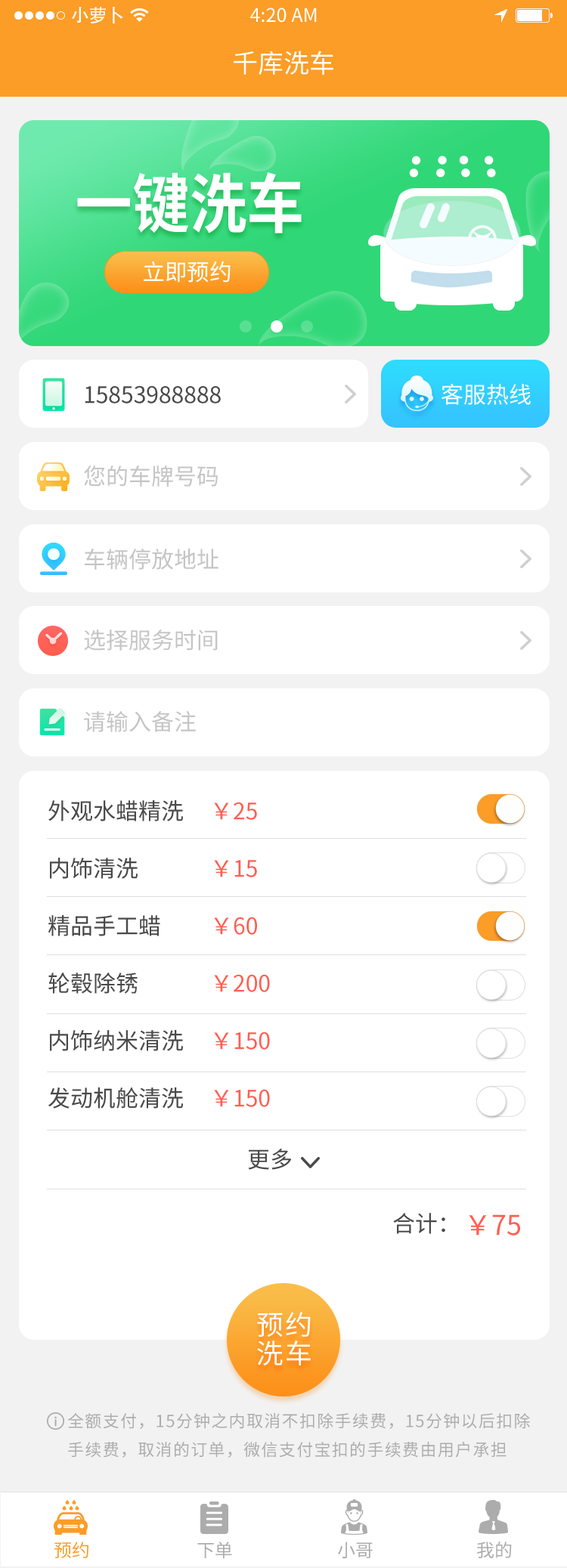
<style>
.page{position:relative;width:567px;height:1568px;background:#ffffff}
.page>*{position:absolute;margin:0}
.t1{font:18.1px "AdobeHeitiStd-Regular";color:#ffffff}
.t2{font:18.9px "SourceHanSansCN-Regular";color:#ffffff}
.t3{font:25.7px "SourceHanSansCN-Regular";color:#ffffff}
.t4{font:64.4px "SourceHanSansCN-Bold";color:#ffffff;scale:0.89 1}
.t5{font:22.7px "SourceHanSansCN-Regular";color:#ffffff}
.t6{font:22.7px "SourceHanSansCN-Regular";color:#4a4a4a}
.t7{font:22.7px "SourceHanSansCN-Regular";color:#c5c5c5}
.t8{font:22.7px/57.4px "SourceHanSansCN-Regular";color:#4a4a4a}
.t9{font:22.7px/57.4px "SourceHanSansCN-Regular";color:#ff5f52}
.t10{font:27.2px "SourceHanSansCN-Regular";color:#ff5f52}
.t11{font:27.2px/28.7px "SourceHanSansCN-Regular";letter-spacing:0.06em;color:#ffffff}
.t12{font:16.6px/28.7px "SourceHanSansCN-Regular";letter-spacing:0.06em;color:#acacac}
.t13{font:18.1px "SourceHanSansCN-Regular";color:#fb9d27}
.t14{font:18.1px "SourceHanSansCN-Regular";color:#acacac}
</style>
<div class="page">
<p class="t1" style="left:72px;top:7px;width:51px;height:16px">小萝卜</p>
<p class="t2" style="left:250px;top:8px;width:67px;height:15px">4:20 AM</p>
<p class="t3" style="left:233px;top:51px;width:100px;height:24px">千库洗车</p>
<p class="t4" style="left:77px;top:172px;width:225px;height:61px">一键洗车</p>
<p class="t5" style="left:144px;top:261px;width:86px;height:22px">立即预约</p>
<p class="t6" style="left:85px;top:385px;width:136px;height:19px">15853988888</p>
<p class="t5" style="left:441px;top:383px;width:89px;height:22px">客服热线</p>
<p class="t7" style="left:84px;top:465px;width:134px;height:22px">您的车牌号码</p>
<p class="t7" style="left:85px;top:549px;width:133px;height:21px">车辆停放地址</p>
<p class="t7" style="left:84px;top:629px;width:134px;height:22px">选择服务时间</p>
<p class="t7" style="left:84px;top:711px;width:112px;height:21px">请输入备注</p>
<p class="t8" style="left:48px;top:800px;width:135px;height:309px">外观水蜡精洗<br>内饰清洗<br>精品手工蜡<br>轮毂除锈<br>内饰纳米清洗<br>发动机舱清洗</p>
<p class="t9" style="left:214px;top:802px;width:56px;height:305px">￥25<br>￥15<br>￥60<br>￥200<br>￥150<br>￥150</p>
<p class="t6" style="left:248px;top:1149px;width:44px;height:21px">更多</p>
<p class="t6" style="left:393px;top:1213px;width:52px;height:21px">合计：</p>
<p class="t10" style="left:469px;top:1214px;width:51px;height:22px">￥75</p>
<p class="t11" style="left:257px;top:1312px;width:54px;height:53px">预约<br>洗车</p>
<p class="t12" style="left:67px;top:1413px;width:463px;height:45px">全额支付，15分钟之内取消不扣除手续费，15分钟以后扣除手续费，取消的订单，微信支付宝扣的手续费由用户承担</p>
<p class="t13" style="left:54px;top:1542px;width:34px;height:16px">预约</p>
<p class="t14" style="left:197px;top:1542px;width:35px;height:17px">下单</p>
<p class="t14" style="left:338px;top:1542px;width:35px;height:17px">小哥</p>
<p class="t14" style="left:477px;top:1542px;width:35px;height:16px">我的</p>
</div>
